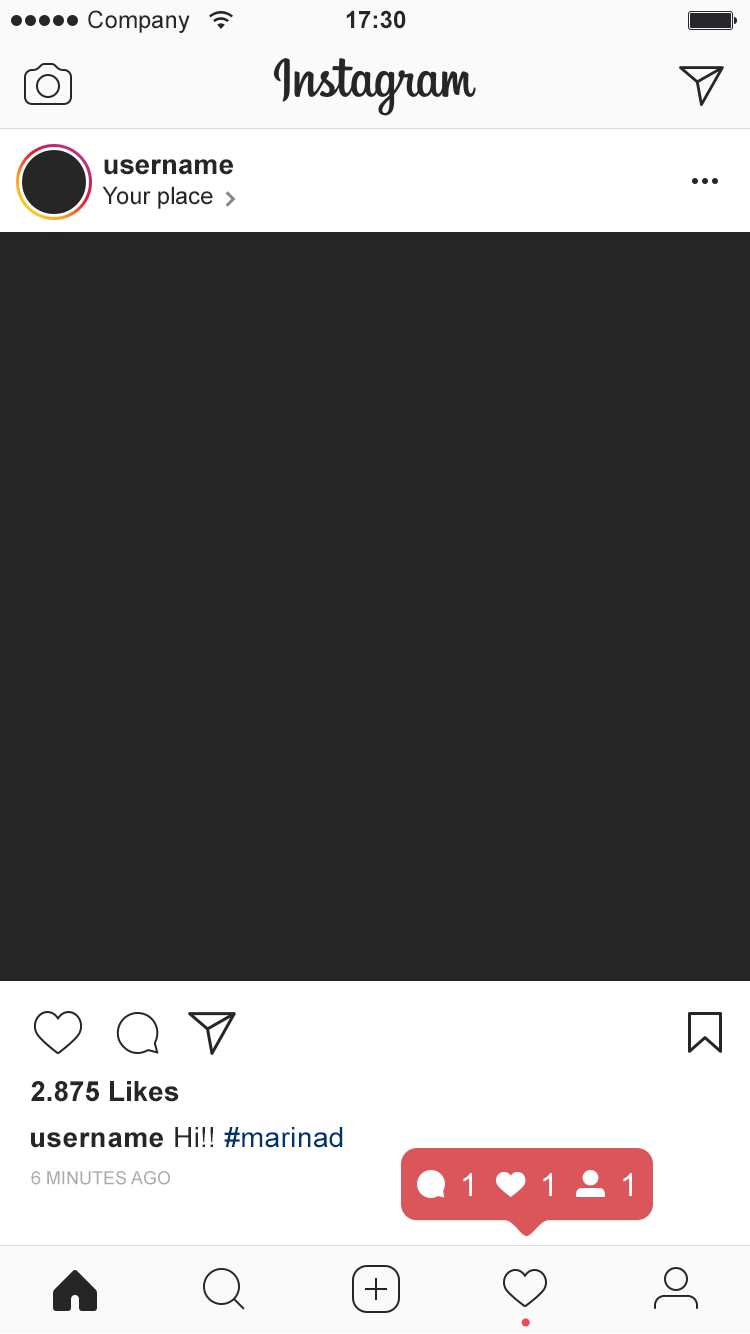
<style>
.page{position:relative;width:750px;height:1334px;background:#262627}
.page>*{position:absolute;margin:0}
.t1{font:24px "ArialMT";color:#262626}
.t2{font:24px "Arial-BoldMT";color:#262626}
.t3{font:28px "Arial-BoldMT";color:#262627}
.t4{font:24px "ArialMT";color:#262627}
.t5{font:28px "Arial-BoldMT";letter-spacing:0.015em;color:#262627}
.t6{font:28px "ArialMT";letter-spacing:0.015em;color:#262627}
.t7{font:28px "ArialMT";letter-spacing:0.015em;color:#003569}
.t8{font:18px "ArialMT";color:#ababac}
.t9{font:32px "ArialMT";color:#ffffff}
</style>
<div class="page">
<p class="t1" style="left:88px;top:10px;width:102px;height:23px">Company</p>
<p class="t2" style="left:346px;top:10px;width:60px;height:19px">17:30</p>
<p class="t3" style="left:104px;top:159px;width:129px;height:16px">username</p>
<p class="t4" style="left:102px;top:186px;width:111px;height:23px">Your place</p>
<p class="t3" style="left:31px;top:1081px;width:148px;height:21px">2.875 Likes</p>
<p class="t5" style="left:31px;top:1127px;width:312px;height:21px">username<span class="t6"> Hi!! </span><span class="t7">#marinad</span></p>
<p class="t8" style="left:31px;top:1171px;width:139px;height:14px">6 MINUTES AGO</p>
<p class="t9" style="left:463px;top:1173px;width:9px;height:23px">1</p>
<p class="t9" style="left:543px;top:1173px;width:9px;height:23px">1</p>
<p class="t9" style="left:623px;top:1173px;width:9px;height:23px">1</p>
</div>
